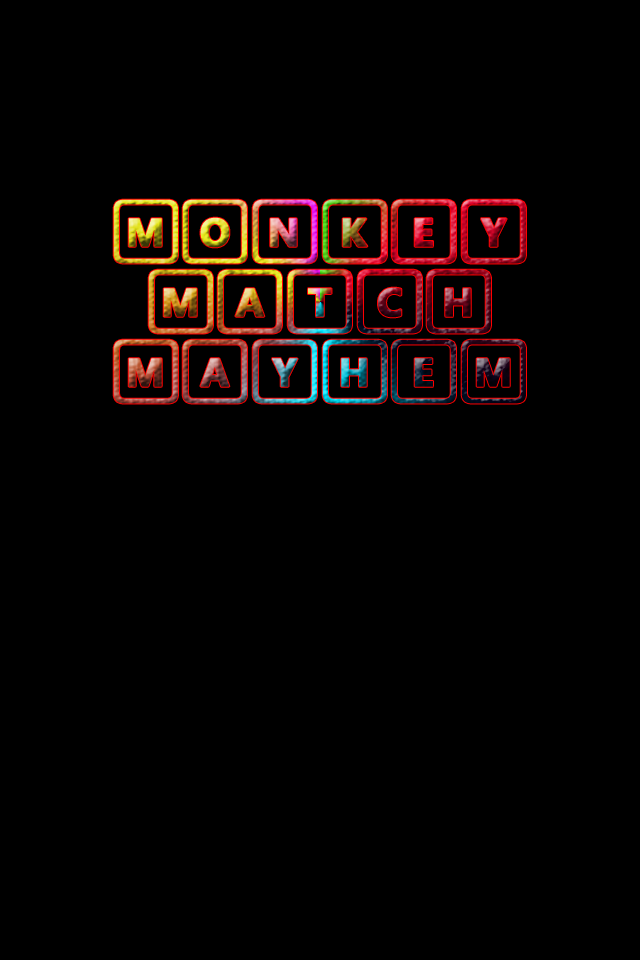
<style>
.page{position:relative;width:640px;height:960px;background:#000000}
.page>*{position:absolute;margin:0}
.t1{font:54.2px/70px "SegoeKeycaps";font-weight:bold}
</style>
<div class="page">
<p class="t1" style="left:113px;top:199px;width:413px;height:205px;text-align:center">MONKEY<br>MATCH<br>MAYHEM</p>
</div>
